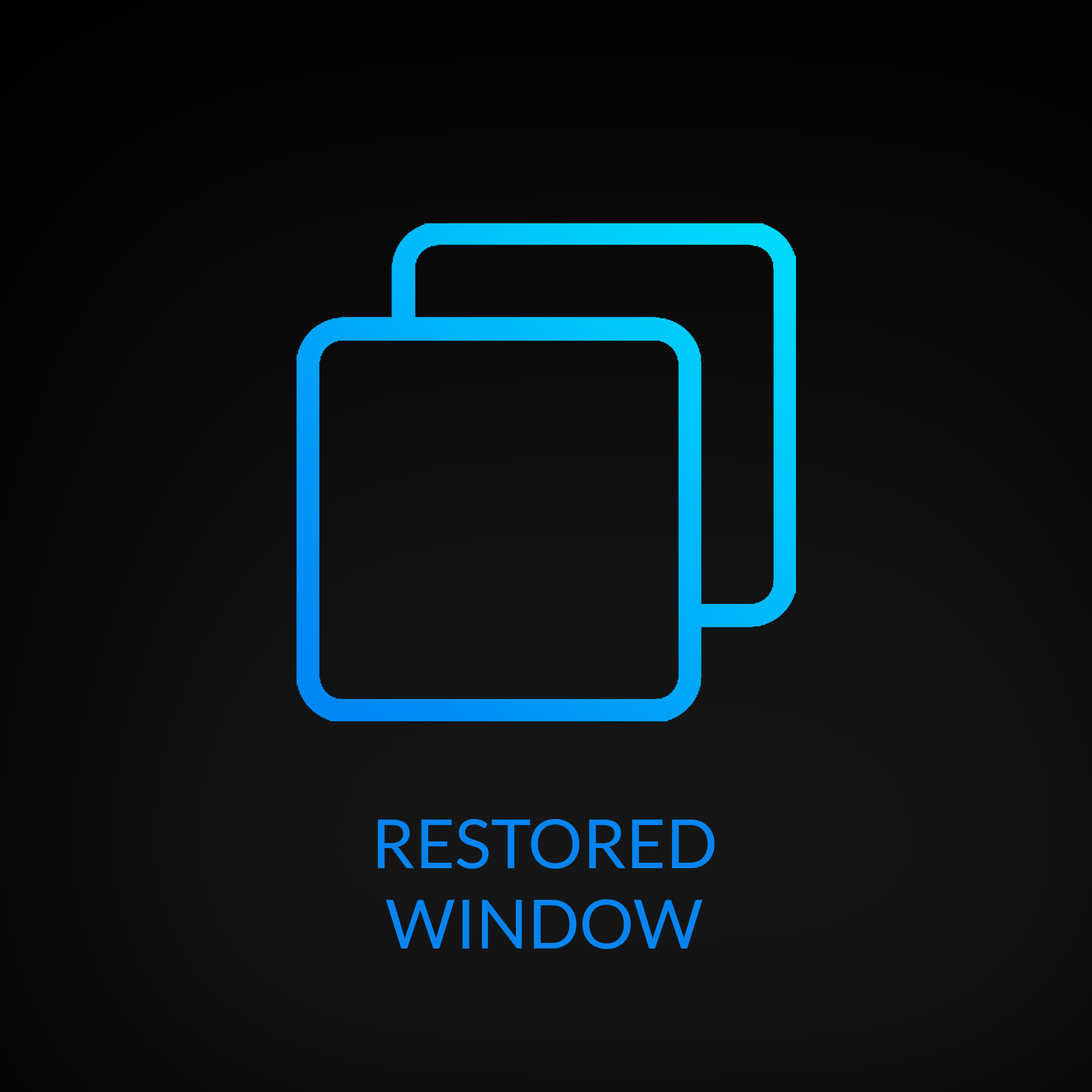
<style>
.page{position:relative;width:1092px;height:1092px}
.page>*{position:absolute;margin:0}
.t1{font:68.2px/80.2px "Lato-Regular";color:#0584f0}
</style>
<div class="page">
<p class="t1" style="left:378px;top:819px;width:337px;height:130px;text-align:center">RESTORED<br>WINDOW</p>
</div>
